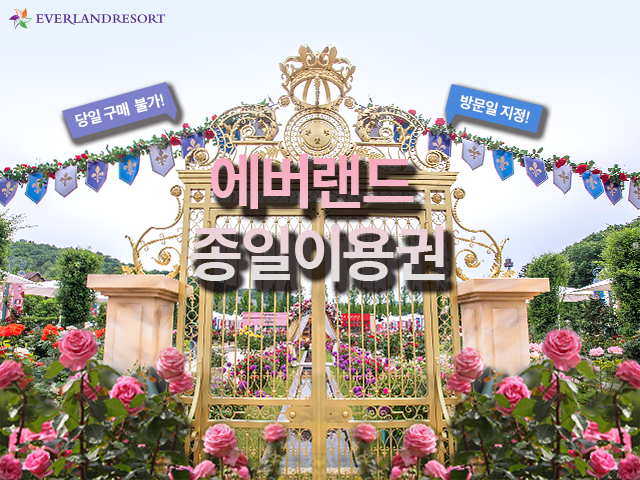
<style>
.page{position:relative;width:640px;height:480px}
.page>*{position:absolute;margin:0}
.t1{font:15px "SpoqaHanSansNeo-Bold";letter-spacing:-0.025em;color:#ffffff}
.t2{font:60px "SpoqaHanSansNeo-Bold";letter-spacing:-0.025em}
</style>
<div class="page">
<p class="t1" style="left:75px;top:94px;width:90px;height:33px;rotate:-14deg">당일 구매  불가!</p>
<p class="t1" style="left:460px;top:95px;width:70px;height:29px;rotate:14deg">방문일 지정!</p>
<p class="t2" style="left:190px;top:153px;width:255px;height:129px;text-align:center">에버랜드 <br>종일이용권</p>
</div>
